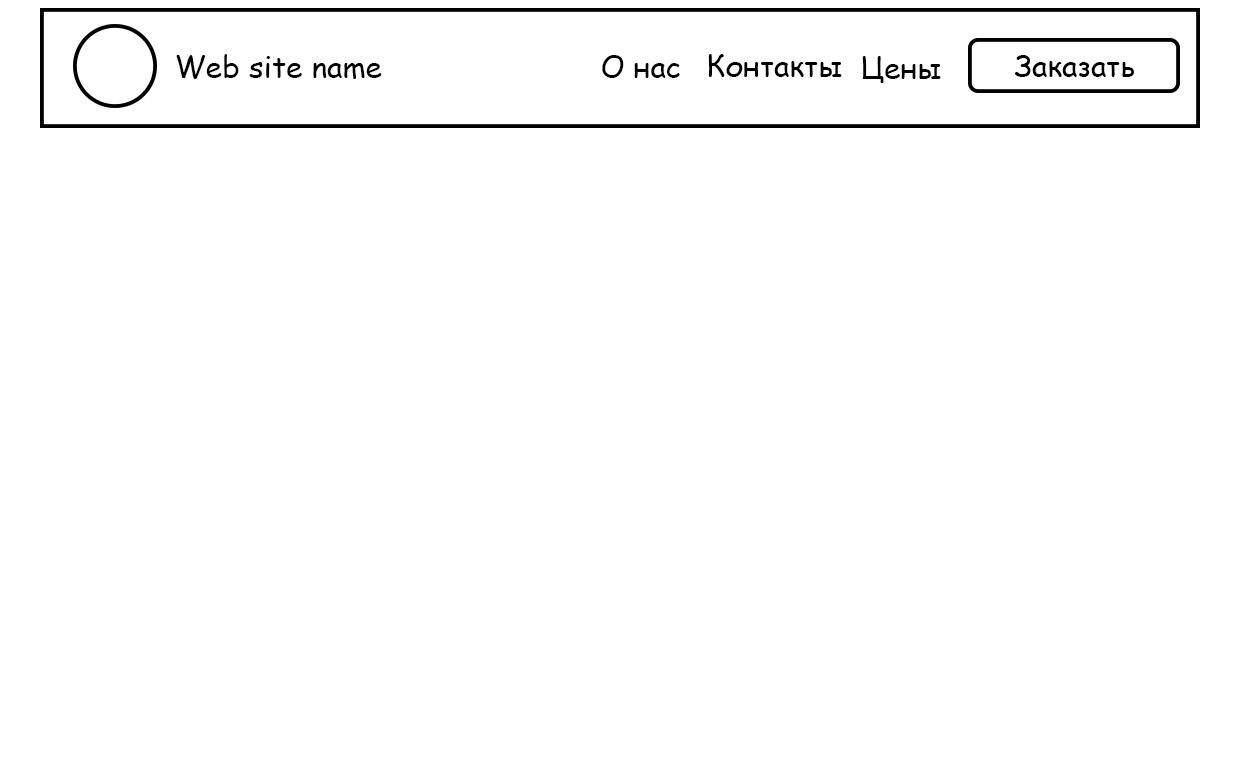
<style>
.page{position:relative;width:1240px;height:768px;background:#ffffff}
.page>*{position:absolute;margin:0}
.t1{font:30px "ComicSansMS";color:#000000}
</style>
<div class="page">
<p class="t1" style="left:176px;top:54px;width:206px;height:25px">Web site name</p>
<p class="t1" style="left:708px;top:54px;width:134px;height:23px">Контакты</p>
<p class="t1" style="left:602px;top:55px;width:78px;height:23px">О нас</p>
<p class="t1" style="left:862px;top:56px;width:79px;height:27px">Цены</p>
<p class="t1" style="left:1015px;top:55px;width:119px;height:22px">Заказать</p>
</div>
